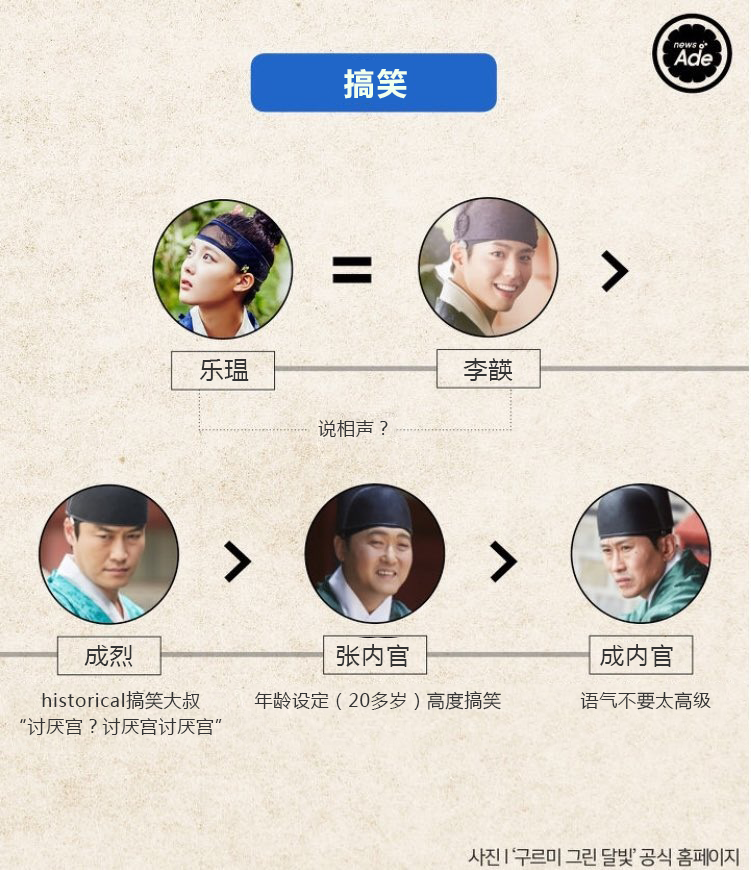
<style>
.page{position:relative;width:751px;height:870px}
.page>*{position:absolute;margin:0}
.t1{font:32px "FZLTCHK--GBK1-0";letter-spacing:0.04em;color:#efffee}
.t2{font:24px "MicrosoftYaHei";letter-spacing:0.04em;color:#333333}
.t3{font:18px "MicrosoftYaHei";letter-spacing:0.04em;color:#333333}
.t4{font:18px/25.7px "MicrosoftYaHei";letter-spacing:0.04em;color:#333333}
</style>
<div class="page">
<p class="t1" style="left:344px;top:69px;width:63px;height:30px">搞笑</p>
<p class="t2" style="left:200px;top:359px;width:49px;height:22px">乐瑥</p>
<p class="t2" style="left:463px;top:358px;width:50px;height:23px">李韺</p>
<p class="t3" style="left:318px;top:420px;width:70px;height:17px">说相声？</p>
<p class="t2" style="left:84px;top:645px;width:49px;height:22px">成烈</p>
<p class="t2" style="left:336px;top:644px;width:73px;height:23px">张内官</p>
<p class="t2" style="left:600px;top:644px;width:73px;height:23px">成内官</p>
<p class="t4" style="left:20px;top:691px;width:202px;height:44px;text-align:center">historical搞笑大叔<br>“讨厌宫？讨厌宫讨厌宫”</p>
<p class="t3" style="left:254px;top:691px;width:247px;height:19px">年龄设定（20多岁）高度搞笑</p>
<p class="t3" style="left:580px;top:692px;width:131px;height:18px">语气不要太高级</p>
</div>
